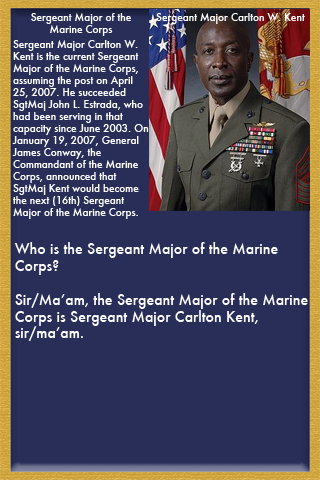
<style>
.page{position:relative;width:320px;height:480px;background:#292e59}
.page>*{position:absolute;margin:0}
.t1{font:10px "Futura-Medium";color:#ffffff}
.t2{font:14px "Futura-Medium";color:#ffffff}
</style>
<div class="page">
<p class="t1" style="left:31px;top:13px;width:100px;height:23px;text-align:center">Sergeant Major of the<br>Marine Corps</p>
<p class="t1" style="left:156px;top:13px;width:149px;height:11px">Sergeant Major Carlton W. Kent</p>
<p class="t1" style="left:12px;top:40px;width:137px;height:179px">Sergeant Major Carlton W. <br>Kent is the current Sergeant <br>Major of the Marine Corps, <br>assuming the post on April <br>25, 2007. He succeeded <br>SgtMaj John L. Estrada, who <br>had been serving in that <br>capacity since June 2003. On <br>January 19, 2007, General <br>James Conway, the <br>Commandant of the Marine <br>Corps, announced that <br>SgtMaj Kent would become <br>the next (16th) Sergeant <br>Major of the Marine Corps.</p>
<p class="t2" style="left:14px;top:242px;width:294px;height:99px">Who is the Sergeant Major of the Marine <br>Corps?<br><br>Sir/Ma’am, the Sergeant Major of the Marine<br>Corps is Sergeant Major Carlton Kent, <br>sir/ma’am.</p>
</div>
